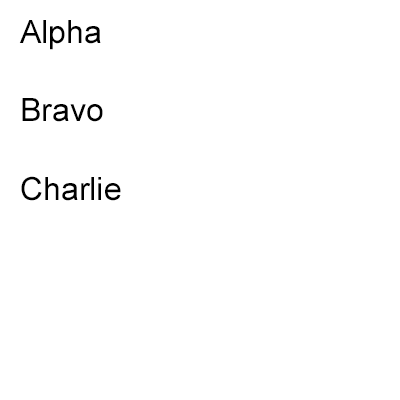
<style>
.page{position:relative;width:400px;height:400px;background:#ffffff}
.page>*{position:absolute;margin:0}
.t1{font:32px "ArialMT";color:#000000}
</style>
<div class="page">
<p class="t1" style="left:19px;top:20px;width:102px;height:181px">Alpha<br>Bravo<br>Charlie</p>
</div>
